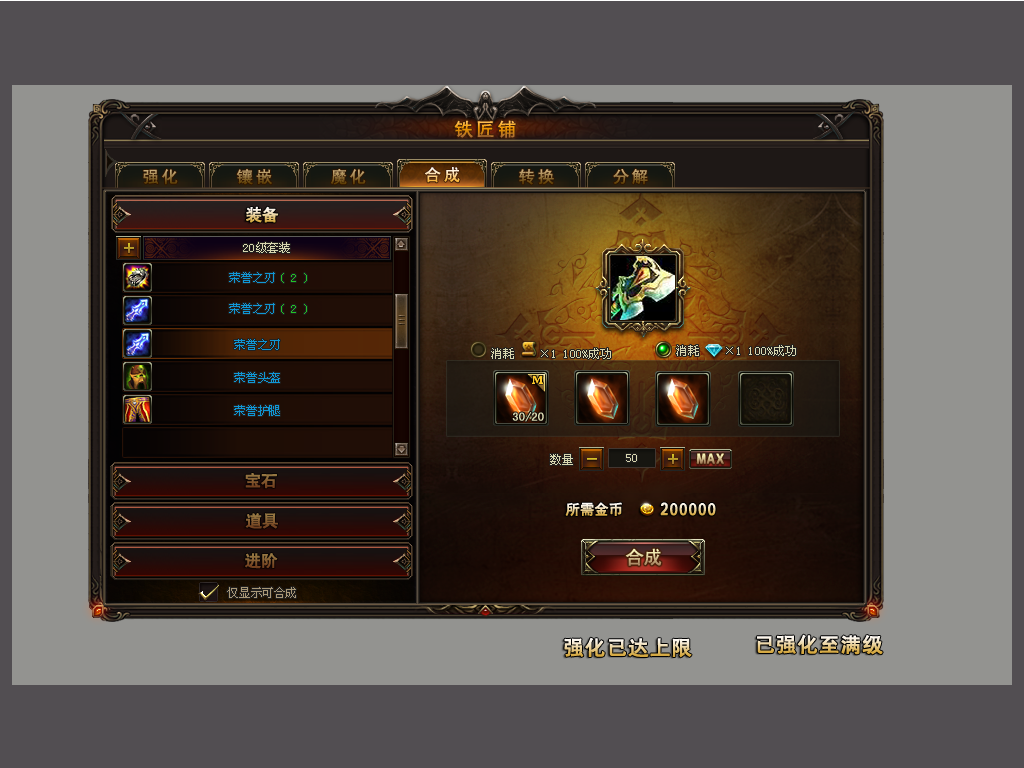
<style>
.page{position:relative;width:1024px;height:768px;background:#524e52}
.page>*{position:absolute;margin:0}
.t1{font:18px "-G-h-e-i-0-1-m";letter-spacing:0.2em}
.t2{font:16px "-G-h-e-i-0-1-m";letter-spacing:0.2em}
.t3{font:16px "-G-h-e-i-0-1-m";font-weight:bold}
.t4{font:12px "SimSun";color:#d8d6af}
.t5{font:12px "SimSun";color:#1096d5}
.t6{font:12px "SimSun";color:#23c423}
.t7{font:12px "SimHei";color:#d8d6af;font-weight:bold}
.t8{font:14px "-G-h-e-i-0-1-m";font-weight:bold}
.t9{font:18px "-G-h-e-i-0-1-m";font-weight:bold}
.t10{font:18px "-G-h-e-i-0-1-m"}
.t11{font:12px "SimSun";color:#a99877}
.t12{font:20px "-G-h-e-i-0-1-m";letter-spacing:0.05em;font-weight:bold}
</style>
<div class="page">
<p class="t1" style="left:454px;top:120px;width:62px;height:18px">铁匠铺</p>
<p class="t2" style="left:143px;top:169px;width:35px;height:16px">强化</p>
<p class="t2" style="left:236px;top:169px;width:36px;height:16px">镶嵌</p>
<p class="t2" style="left:331px;top:169px;width:35px;height:16px">魔化</p>
<p class="t2" style="left:424px;top:167px;width:36px;height:16px">合成</p>
<p class="t2" style="left:519px;top:169px;width:35px;height:16px">转换</p>
<p class="t2" style="left:613px;top:169px;width:35px;height:16px">分解</p>
<p class="t3" style="left:246px;top:206px;width:33px;height:17px">装备</p>
<p class="t4" style="left:243px;top:242px;width:47px;height:11px">20级套装</p>
<p class="t5" style="left:229px;top:272px;width:46px;height:11px">荣誉之刃</p>
<p class="t6" style="left:281px;top:273px;width:26px;height:10px">( 2 )</p>
<p class="t5" style="left:229px;top:303px;width:46px;height:11px">荣誉之刃</p>
<p class="t6" style="left:281px;top:304px;width:26px;height:10px">( 2 )</p>
<p class="t5" style="left:234px;top:339px;width:46px;height:11px">荣誉之刃</p>
<p class="t4" style="left:491px;top:348px;width:120px;height:11px">消耗    ×1 100%成功</p>
<p class="t4" style="left:676px;top:345px;width:120px;height:11px">消耗    ×1 100%成功</p>
<p class="t5" style="left:234px;top:372px;width:46px;height:11px">荣誉头盔</p>
<p class="t5" style="left:234px;top:405px;width:46px;height:11px">荣誉护腿</p>
<p class="t7" style="left:512px;top:412px;width:32px;height:10px">30/20</p>
<p class="t4" style="left:550px;top:454px;width:23px;height:11px">数量</p>
<p class="t4" style="left:626px;top:454px;width:11px;height:8px">50</p>
<p class="t3" style="left:245px;top:473px;width:32px;height:16px">宝石</p>
<p class="t8" style="left:565px;top:502px;width:57px;height:15px">所需金币</p>
<p class="t9" style="left:660px;top:502px;width:56px;height:14px">200000</p>
<p class="t3" style="left:245px;top:513px;width:33px;height:16px">道具</p>
<p class="t3" style="left:245px;top:553px;width:33px;height:16px">进阶</p>
<p class="t10" style="left:625px;top:548px;width:37px;height:18px">合成</p>
<p class="t11" style="left:227px;top:587px;width:69px;height:11px">仅显示可合成</p>
<p class="t12" style="left:564px;top:637px;width:128px;height:21px">强化已达上限</p>
<p class="t12" style="left:757px;top:634px;width:126px;height:21px">已强化至满级</p>
</div>
